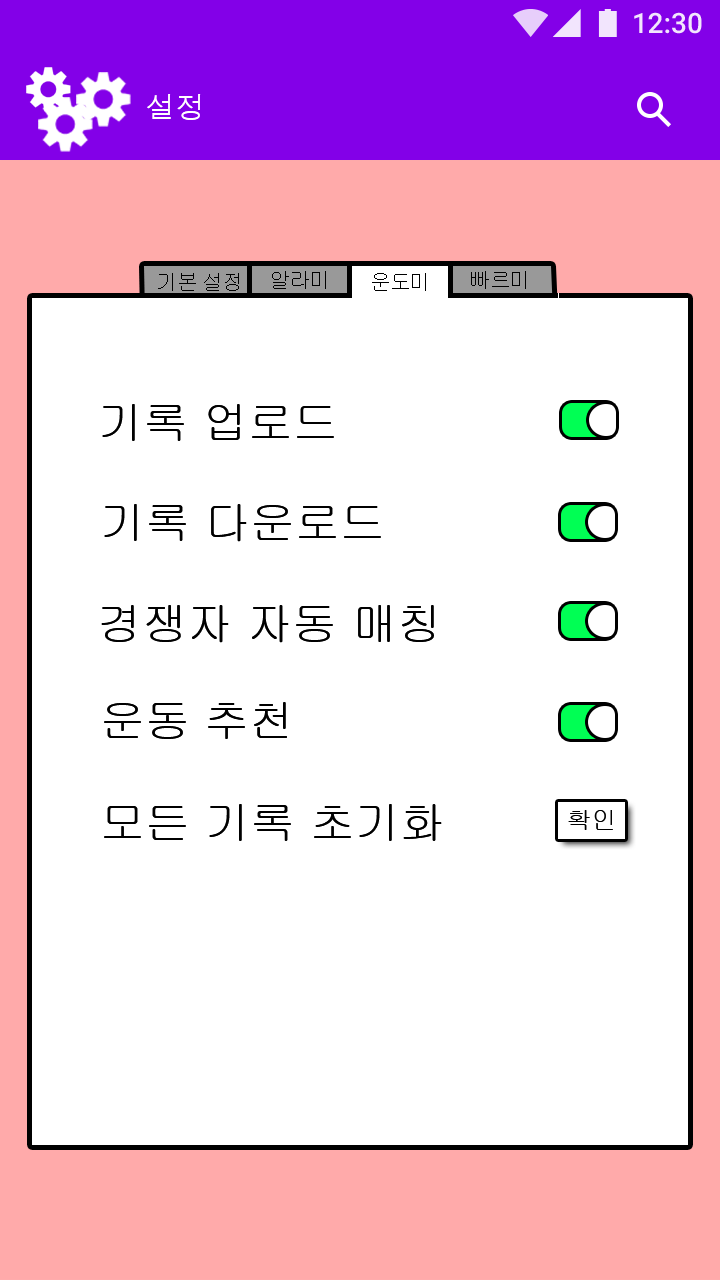
<style>
.page{position:relative;width:720px;height:1280px;background:#ffffff}
.page>*{position:absolute;margin:0}
.t1{font:30px "Dotum";color:#ffffff}
.t2{font:20px "Gulim";color:#000000}
.t3{font:45px "Gulim";color:#000000}
.t4{font:25px "Gulim";color:#000000}
</style>
<div class="page">
<p class="t1" style="left:147px;top:94px;width:54px;height:26px">설정</p>
<p class="t2" style="left:158px;top:273px;width:81px;height:18px">기본 설정</p>
<p class="t2" style="left:272px;top:271px;width:54px;height:18px">알라미</p>
<p class="t2" style="left:372px;top:273px;width:54px;height:18px">운도미</p>
<p class="t2" style="left:471px;top:271px;width:55px;height:18px">빠르미</p>
<p class="t3" style="left:102px;top:404px;width:232px;height:37px">기록 업로드</p>
<p class="t3" style="left:104px;top:504px;width:277px;height:38px">기록 다운로드</p>
<p class="t3" style="left:101px;top:605px;width:333px;height:38px">경쟁자 자동 매칭</p>
<p class="t3" style="left:104px;top:702px;width:183px;height:37px">운동 추천</p>
<p class="t3" style="left:104px;top:804px;width:338px;height:37px">모든 기록 초기화</p>
<p class="t4" style="left:568px;top:810px;width:45px;height:20px">확인</p>
</div>
